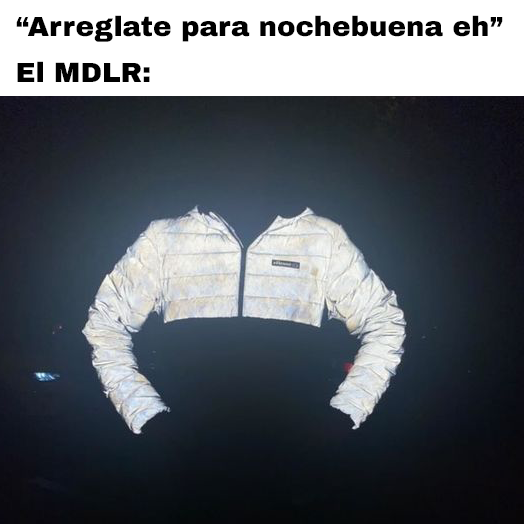
<style>
.page{position:relative;width:524px;height:524px}
.page>*{position:absolute;margin:0}
.t1{font:27.8px "ArchivoBlack-Regular";color:#000000}
</style>
<div class="page">
<p class="t1" style="left:16px;top:15px;width:487px;height:67px">“Arreglate para nochebuena eh”<br>El MDLR:</p>
</div>
